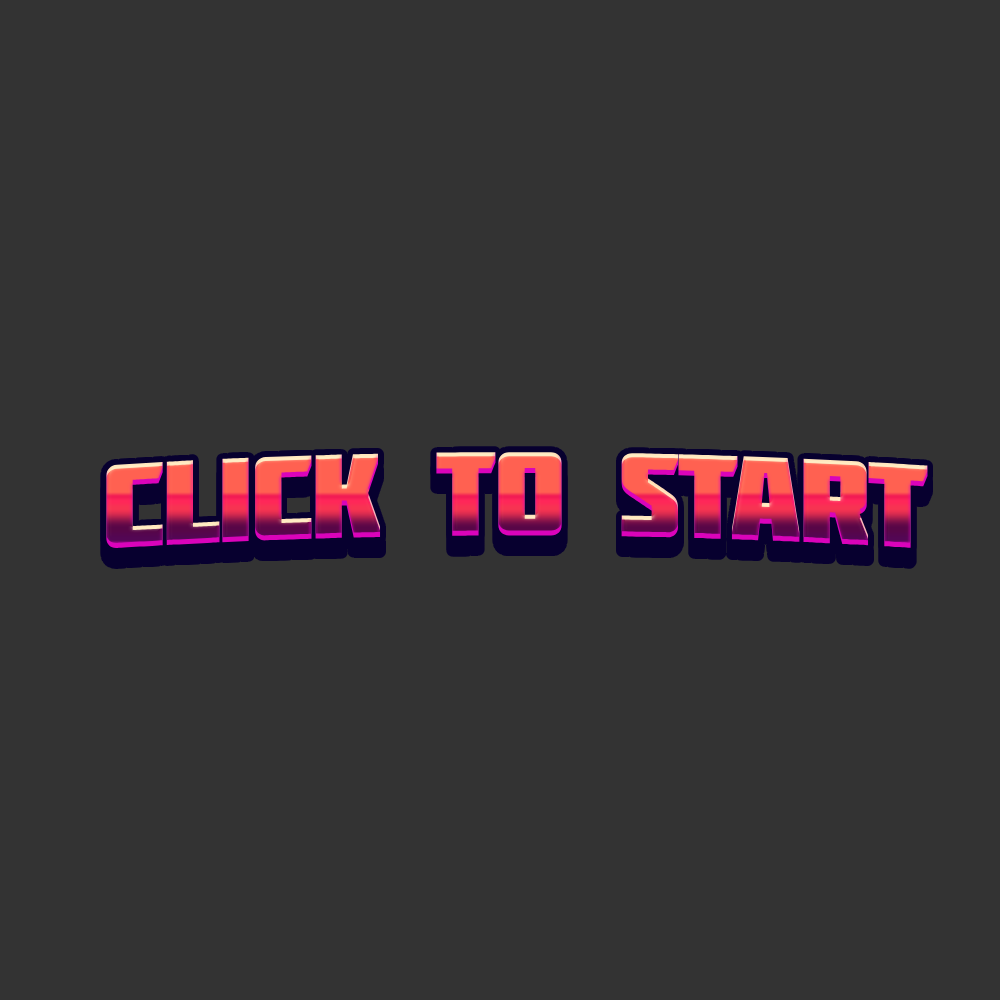
<style>
.page{position:relative;width:1000px;height:1000px;background:#333333}
.page>*{position:absolute;margin:0}
.t1{font:119px "Molot";letter-spacing:-0.025em}
</style>
<div class="page">
<p class="t1" style="left:106px;top:452px;width:822px;height:97px">CLICK TO START</p>
</div>
